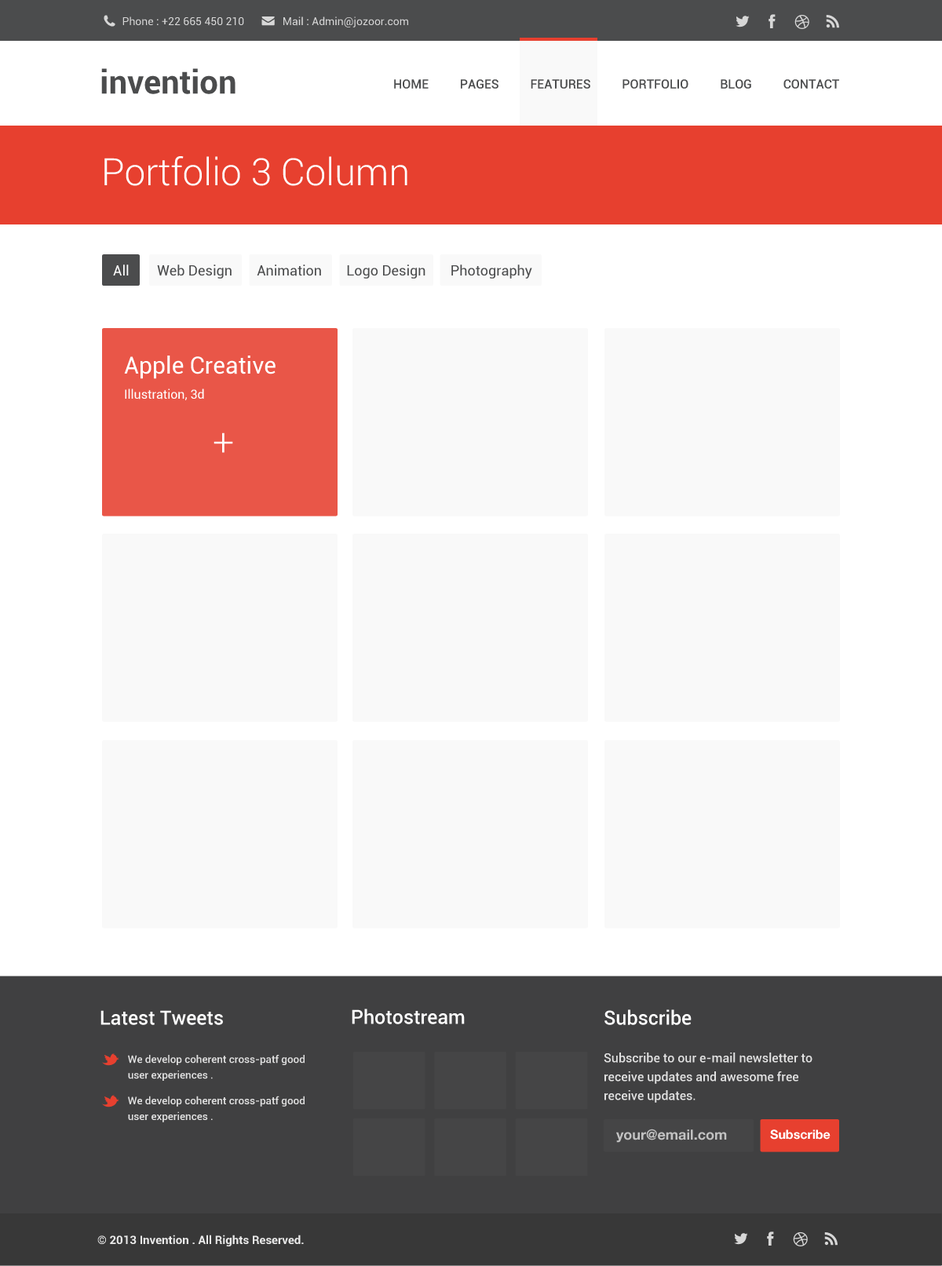
<style>
.page{position:relative;width:942px;height:1266px;background:#ffffff}
.page>*{position:absolute;margin:0}
.t1{font:11px "Roboto-Regular";color:#d7d7d7}
.t2{font:12.6px "Roboto-Medium";color:#4b4c4d}
.t3{font:37.7px "Roboto-Light";color:#ffffff}
.t4{font:14.1px "Roboto-Regular";color:#4b4c4d}
.t5{font:14.1px "Roboto-Regular";color:#ffffff}
.t6{font:23.5px "Roboto-Regular";color:#ffffff}
.t7{font:12.6px "Roboto-Regular";color:#ffffff}
.t8{font:19.6px "Roboto-Medium";color:#ffffff}
.t9{font:12.6px/18.8px "Roboto-Medium";color:#e1e1e1}
.t10{font:19.6px/22.5px "Roboto-Medium";color:#ffffff}
.t11{font:10.5px/15.8px "Roboto-Medium";color:#e1e1e1}
.t12{font:18.8px/5.3px "Roboto-Bold";color:#ffffff}
.t13{font:14.1px "HelveticaNeue-Bold";color:#c2c2c2}
.t14{font:12.6px "HelveticaNeue-Bold";color:#ffffff}
.t15{font:11.8px "Roboto-Bold";color:#eaeaea}
</style>
<div class="page">
<p class="t1" style="left:122px;top:16px;width:286px;height:11px">Phone : +22 665 450 210              Mail : Admin@jozoor.com</p>
<p class="t2" style="left:394px;top:79px;width:445px;height:10px">HOME          PAGES          FEATURES          PORTFOLIO          BLOG          CONTACT</p>
<p class="t3" style="left:104px;top:156px;width:303px;height:30px">Portfolio 3 Column</p>
<p class="t4" style="left:113px;top:265px;width:419px;height:14px"><span class="t5">All        </span>Web Design       Animation       Logo Design       Photography</p>
<p class="t6" style="left:124px;top:356px;width:151px;height:23px">Apple Creative</p>
<p class="t7" style="left:125px;top:389px;width:79px;height:11px">Illustration, 3d</p>
<p class="t3" style="left:213px;top:432px;width:20px;height:21px">+</p>
<p class="t8" style="left:100px;top:1010px;width:123px;height:15px">Latest Tweets</p>
<p class="t8" style="left:352px;top:1009px;width:113px;height:15px">Photostream</p>
<p class="t9" style="left:604px;top:1009px;width:208px;height:94px"><span class="t10">Subscribe<br><br><br><br></span>Subscribe to our e-mail newsletter to<br>receive updates and awesome free<br>receive updates.</p>
<p class="t11" style="left:128px;top:1055px;width:177px;height:67px"><span class="t12"><br>        </span>We develop coherent cross-patf good<br>        user experiences .<br><br>        We develop coherent cross-patf good<br>        user experiences .</p>
<p class="t13" style="left:616px;top:1129px;width:111px;height:14px">your@email.com</p>
<p class="t14" style="left:770px;top:1129px;width:60px;height:11px">Subscribe</p>
<p class="t15" style="left:97px;top:1235px;width:207px;height:11px">© 2013 Invention . All Rights Reserved.</p>
</div>
